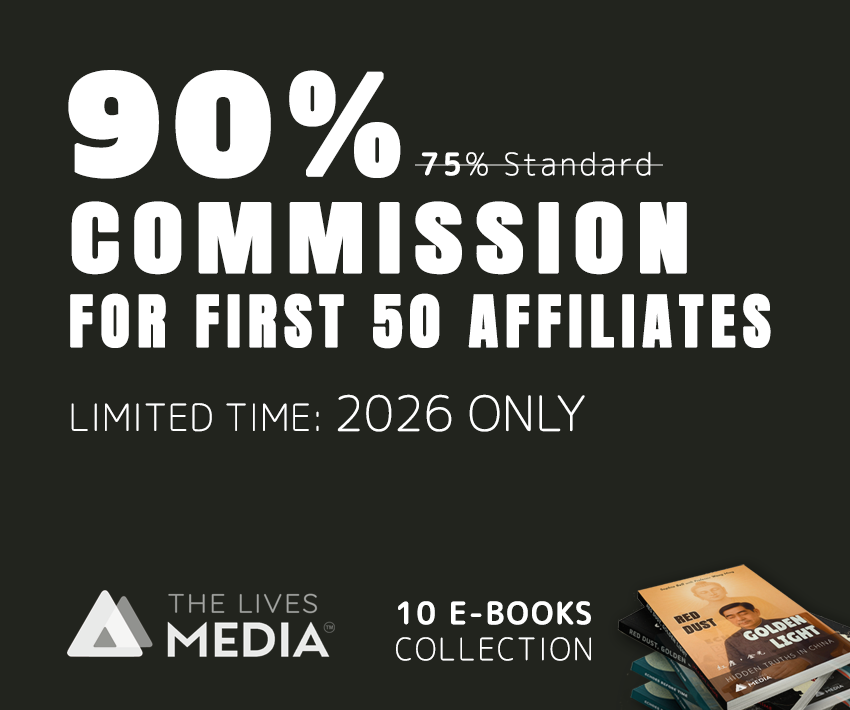
<style>
.page{position:relative;width:850px;height:710px;background:#22241e}
.page>*{position:absolute;margin:0}
.t1{font:130px "AlfaSlabOne-Regular";letter-spacing:0.1em;color:#ffffff;font-weight:bold}
.t2{font:30px "RoundedMplus1c-Thin";letter-spacing:0.1em;color:#ffffff;font-weight:bold}
.t3{font:30px "RoundedMplus1c-Medium";letter-spacing:0.1em;color:#ffffff;font-weight:bold}
.t4{font:80px "Anton-Regular";letter-spacing:0.1em;color:#ffffff;font-weight:bold;scale:1.3 1}
.t5{font:60px "Anton-Regular";letter-spacing:0.1em;color:#ffffff;font-weight:bold}
.t6{font:36px "RoundedMplus1c-Thin";letter-spacing:0.01em;color:#ffffff;font-weight:bold}
.t7{font:47px "RoundedMplus1c-Thin";letter-spacing:0.01em;color:#ffffff;font-weight:bold}
.t8{font:30px "RoundedMplus1c-Medium";letter-spacing:0.06em;color:#ffffff;font-weight:bold}
.t9{font:30px "RoundedMplus1c-Thin";letter-spacing:0.06em;color:#ffffff;font-weight:bold}
</style>
<div class="page">
<p class="t1" style="left:68px;top:70px;width:333px;height:109px">90%</p>
<p class="t2" style="left:421px;top:151px;width:230px;height:25px"><span class="t3">75</span>% Standard</p>
<p class="t4" style="left:71px;top:201px;width:616px;height:74px">COMMISSION</p>
<p class="t5" style="left:70px;top:293px;width:701px;height:56px">FOR FIRST 50 AFFILIATES</p>
<p class="t6" style="left:71px;top:394px;width:514px;height:38px">LIMITED TIME: <span class="t7">2026 ONLY</span></p>
<p class="t8" style="left:396px;top:601px;width:195px;height:60px">10 E-BOOKS <br><span class="t9">COLLECTION</span></p>
</div>
